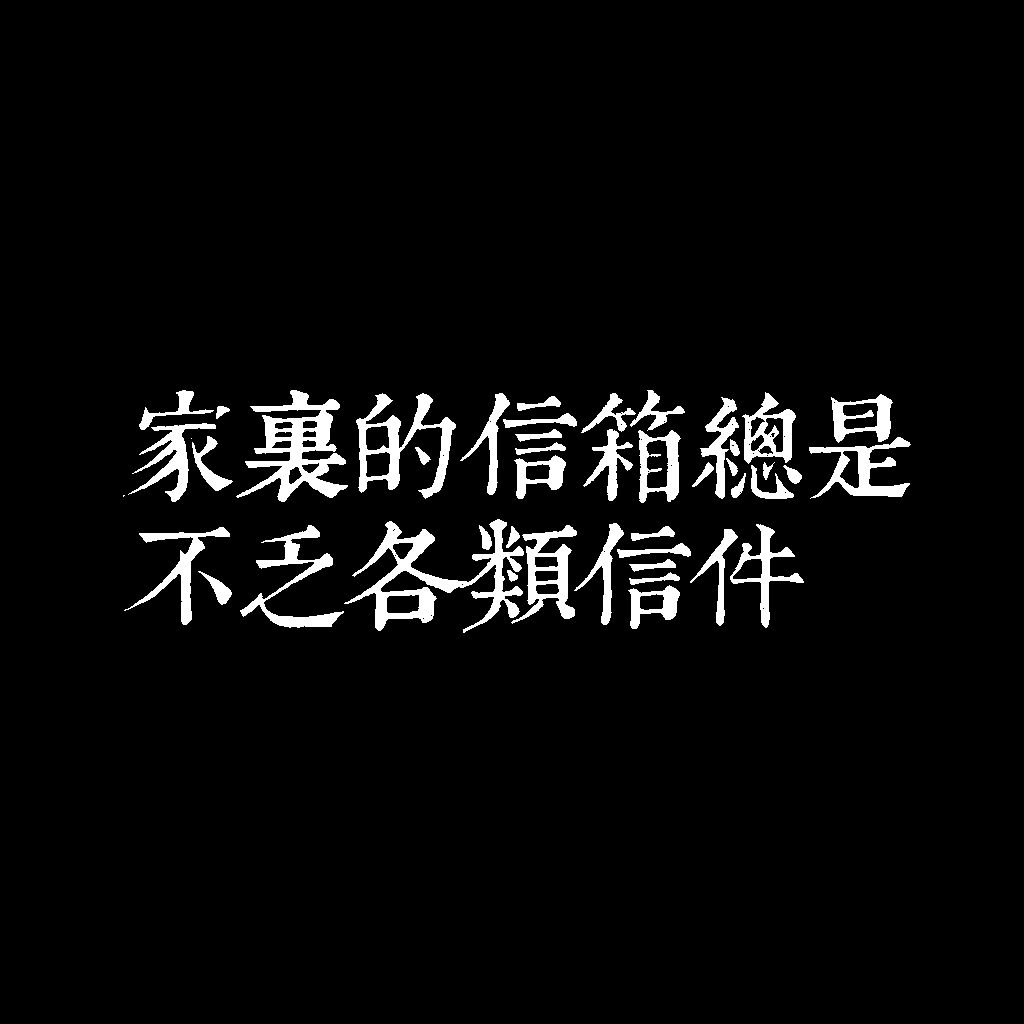
<style>
.page{position:relative;width:1024px;height:1024px;background:#000000}
.page>*{position:absolute;margin:0}
.t1{font:116px/130px "TpldKhangXiDictTrial";letter-spacing:-0.02em;color:#ffffff}
</style>
<div class="page">
<p class="t1" style="left:123px;top:390px;width:788px;height:243px">家裡的信箱總是<br>不乏各類信件</p>
</div>
